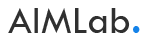
<style>
.page{position:relative;width:148px;height:40px;background:#ffffff}
.page>*{position:absolute;margin:0}
.t1{font:40px "TwCenMT-Regular";color:#303030}
.t2{font:48px "TwCenMT-Regular";color:#1583e9}
</style>
<div class="page">
<p class="t1" style="left:8px;top:8px;width:132px;height:25px">AIMLab<span class="t2">.</span></p>
</div>
